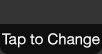
<style>
.page{position:relative;width:102px;height:54px;background:#0f0f0f}
.page>*{position:absolute;margin:0}
.t1{font:15px "HelveticaNeue";color:#ffffff}
</style>
<div class="page">
<p class="t1" style="left:2px;top:33px;width:98px;height:15px">Tap to Change</p>
</div>
